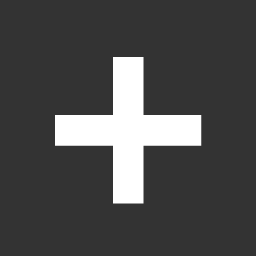
<style>
.page{position:relative;width:256px;height:256px;background:#333333}
.page>*{position:absolute;margin:0}
.t1{font:307px "SegoeUI-Bold";color:#ffffff}
</style>
<div class="page">
<p class="t1" style="left:55px;top:57px;width:147px;height:147px">+</p>
</div>
